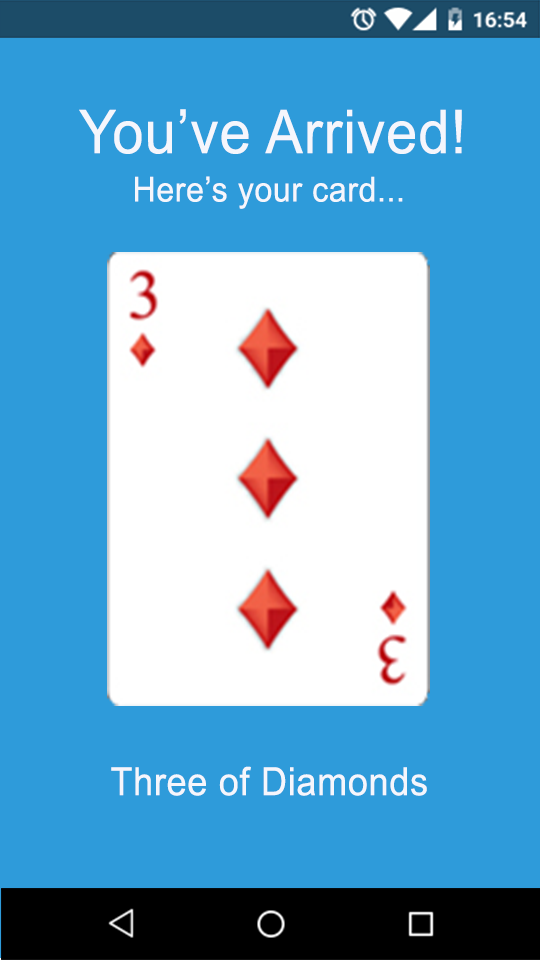
<style>
.page{position:relative;width:540px;height:960px;background:#2e9bda}
.page>*{position:absolute;margin:0}
.t1{font:60.5px "ArialMT";letter-spacing:0.02em;color:#f5f6fc;scale:0.93 1}
.t2{font:34.6px "ArialMT";letter-spacing:0.02em;color:#f5f6fc;scale:0.93 1}
.t3{font:38.9px "ArialMT";letter-spacing:0.02em;color:#f5f6fc;scale:0.93 1}
</style>
<div class="page">
<p class="t1" style="left:79px;top:109px;width:383px;height:45px">You’ve Arrived!</p>
<p class="t2" style="left:135px;top:176px;width:268px;height:33px">Here’s your card...</p>
<p class="t3" style="left:111px;top:766px;width:316px;height:30px">Three of Diamonds</p>
</div>
